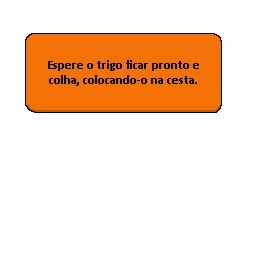
<style>
.page{position:relative;width:256px;height:256px;background:#ffffff}
.page>*{position:absolute;margin:0}
.t1{font:12.5px "Calibri-Bold";color:#000000}
</style>
<div class="page">
<p class="t1" style="left:48px;top:60px;width:151px;height:26px;text-align:center">Espere o trigo ficar pronto e colha, colocando-o na cesta.</p>
</div>
